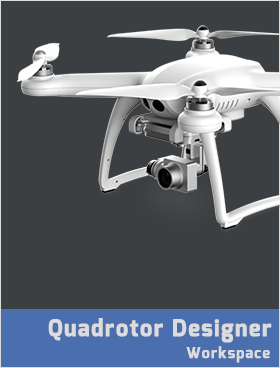
<style>
.page{position:relative;width:280px;height:368px;background:#3c3f41}
.page>*{position:absolute;margin:0}
.t1{font:22.5px "Exo-Bold";letter-spacing:0.06em;color:#dcdcdc;font-weight:bold;scale:0.96 1}
.t2{font:15px "Exo-Bold";letter-spacing:0.06em;color:#dcdcdc;font-weight:bold;scale:0.96 1}
</style>
<div class="page">
<p class="t1" style="left:48px;top:318px;width:224px;height:25px">Quadrotor Designer</p>
<p class="t2" style="left:186px;top:346px;width:84px;height:17px">Workspace</p>
</div>
